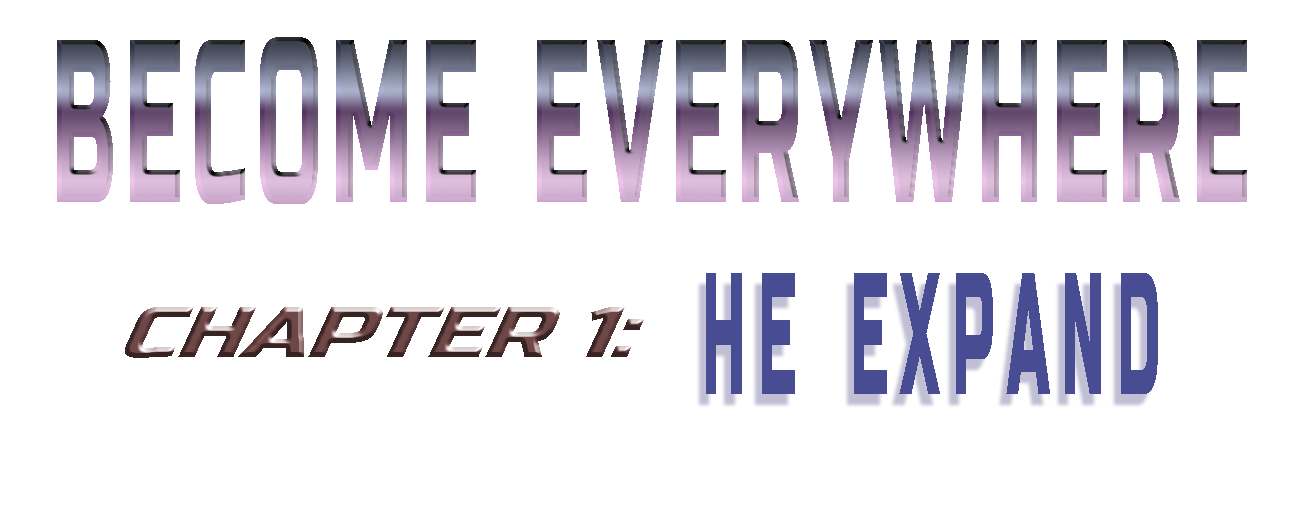
<style>
.page{position:relative;width:1300px;height:512px;background:#ffffff}
.page>*{position:absolute;margin:0}
.t1{font:232px "RussoOne-Regular";scale:0.39 1}
.t2{font:173.3px "RussoOne-Regular";color:#484c92;scale:0.35 1}
.t3{font:79.2px "RussoOne-Regular";scale:1.14 1}
</style>
<div class="page">
<p class="t1" style="left:57px;top:37px;width:1190px;height:167px">BECOME  EVERYWHERE</p>
<p class="t2" style="left:706px;top:273px;width:452px;height:121px">HE   EXPAND</p>
<p class="t3" style="left:125px;top:307px;width:519px;height:51px">CHAPTER 1:</p>
</div>
